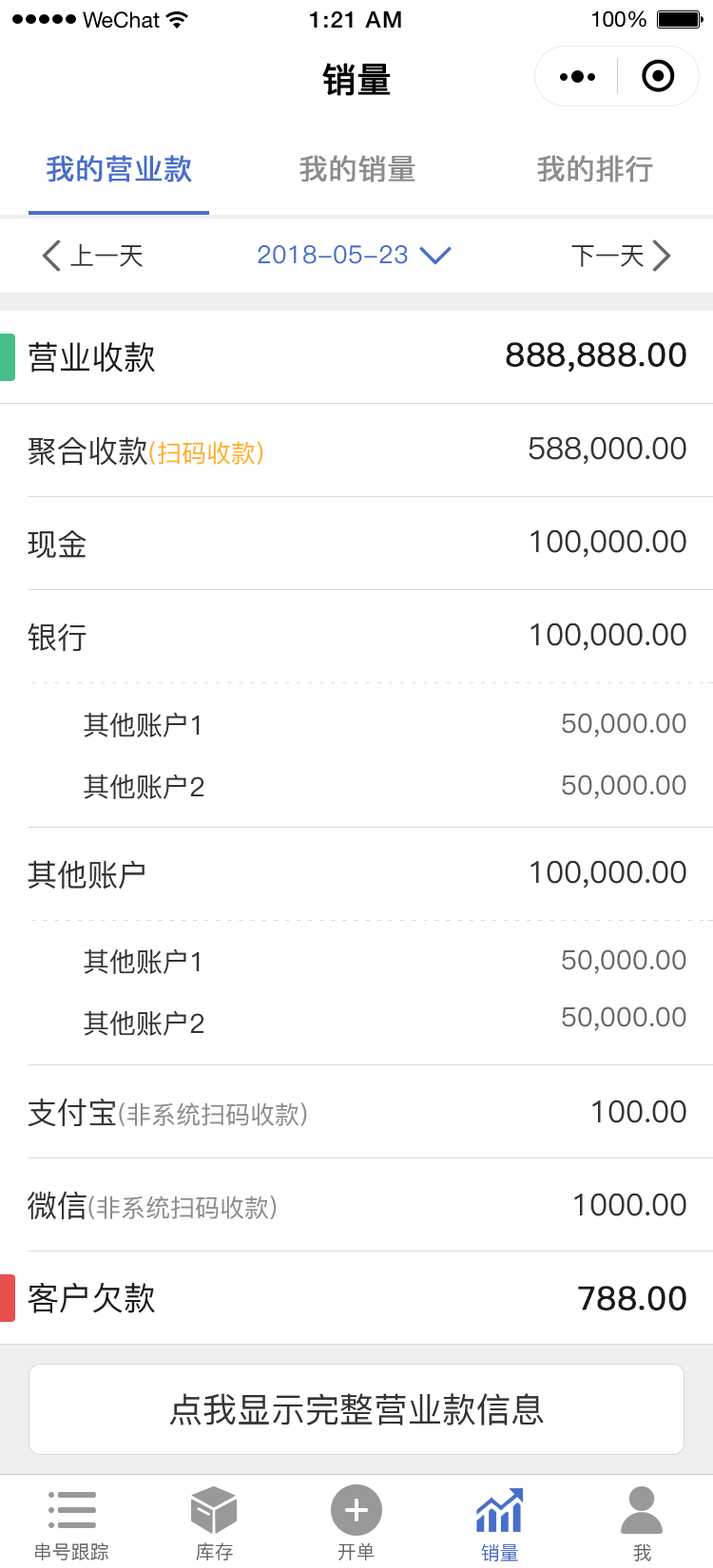
<style>
.page{position:relative;width:713px;height:1568px;background:#ffffff}
.page>*{position:absolute;margin:0}
.t1{font:34.2px "PingFang-SC-Medium";color:#000000;font-weight:bold}
.t2{font:28.5px "PingFang-SC-Medium";color:#476ec9;font-weight:bold}
.t3{font:28.5px "PingFang-SC-Medium";color:#8c8c8c;font-weight:bold}
.t4{font:24.7px "PingFang-SC-Medium";color:#333333}
.t5{font:24.7px "PingFang-SC-Medium";color:#476ec9}
.t6{font:32.3px "PingFang-SC-Medium";color:#1a1a1a}
.t7{font:32.3px "PingFang-SC-Medium";color:#1a1a1a;font-weight:bold}
.t8{font:24.7px "PingFang-SC-Medium";color:#ffaf23}
.t9{font:30.4px "PingFang-SC-Medium";color:#333333}
.t10{font:26.6px "PingFang-SC-Medium";color:#333333}
.t11{font:26.6px "PingFang-SC-Medium";color:#666666}
.t12{font:24.7px "PingFang-SC-Medium";color:#8c8c8c}
.t13{font:34.2px "PingFang-SC-Medium";color:#333333}
.t14{font:19px "PingFang-SC-Medium";color:#666666}
.t15{font:19px "PingFang-SC-Medium";color:#476ec9}
</style>
<div class="page">
<p class="t1" style="left:322px;top:63px;width:69px;height:33px">销量</p>
<p class="t2" style="left:47px;top:155px;width:145px;height:27px">我的营业款</p>
<p class="t3" style="left:299px;top:155px;width:116px;height:27px">我的销量</p>
<p class="t3" style="left:537px;top:155px;width:116px;height:27px">我的排行</p>
<p class="t4" style="left:70px;top:243px;width:73px;height:24px">上一天</p>
<p class="t5" style="left:258px;top:245px;width:150px;height:19px">2018-05-23</p>
<p class="t4" style="left:571px;top:245px;width:72px;height:22px">下一天</p>
<p class="t6" style="left:29px;top:342px;width:126px;height:31px">营业收款</p>
<p class="t7" style="left:506px;top:342px;width:180px;height:31px">888,888.00</p>
<p class="t8" style="left:28px;top:436px;width:235px;height:30px"><span class="t9">聚合收款</span>(扫码收款)</p>
<p class="t9" style="left:528px;top:436px;width:158px;height:29px">588,000.00</p>
<p class="t9" style="left:28px;top:530px;width:58px;height:29px">现金</p>
<p class="t9" style="left:530px;top:529px;width:156px;height:29px">100,000.00</p>
<p class="t9" style="left:28px;top:623px;width:58px;height:29px">银行</p>
<p class="t9" style="left:530px;top:622px;width:156px;height:29px">100,000.00</p>
<p class="t10" style="left:84px;top:713px;width:116px;height:24px">其他账户1</p>
<p class="t11" style="left:562px;top:713px;width:124px;height:24px">50,000.00</p>
<p class="t10" style="left:84px;top:774px;width:119px;height:25px">其他账户2</p>
<p class="t11" style="left:562px;top:774px;width:124px;height:25px">50,000.00</p>
<p class="t9" style="left:28px;top:860px;width:116px;height:29px">其他账户</p>
<p class="t9" style="left:530px;top:860px;width:156px;height:29px">100,000.00</p>
<p class="t10" style="left:84px;top:949px;width:116px;height:25px">其他账户1</p>
<p class="t11" style="left:562px;top:949px;width:124px;height:25px">50,000.00</p>
<p class="t10" style="left:84px;top:1011px;width:119px;height:25px">其他账户2</p>
<p class="t11" style="left:562px;top:1006px;width:124px;height:25px">50,000.00</p>
<p class="t12" style="left:28px;top:1098px;width:279px;height:29px"><span class="t9">支付宝</span>(非系统扫码收款)</p>
<p class="t9" style="left:592px;top:1100px;width:94px;height:23px">100.00</p>
<p class="t12" style="left:28px;top:1191px;width:249px;height:29px"><span class="t9">微信</span>(非系统扫码收款)</p>
<p class="t9" style="left:574px;top:1193px;width:112px;height:23px">1000.00</p>
<p class="t6" style="left:28px;top:1283px;width:127px;height:30px">客户欠款</p>
<p class="t7" style="left:578px;top:1286px;width:108px;height:24px">788.00</p>
<p class="t13" style="left:169px;top:1393px;width:375px;height:32px">点我显示完整营业款信息</p>
<p class="t14" style="left:35px;top:1542px;width:73px;height:18px">串号跟踪</p>
<p class="t14" style="left:196px;top:1542px;width:37px;height:18px">库存</p>
<p class="t14" style="left:337px;top:1542px;width:37px;height:18px">开单</p>
<p class="t15" style="left:481px;top:1543px;width:37px;height:18px">销量</p>
<p class="t14" style="left:633px;top:1543px;width:18px;height:18px">我</p>
</div>
